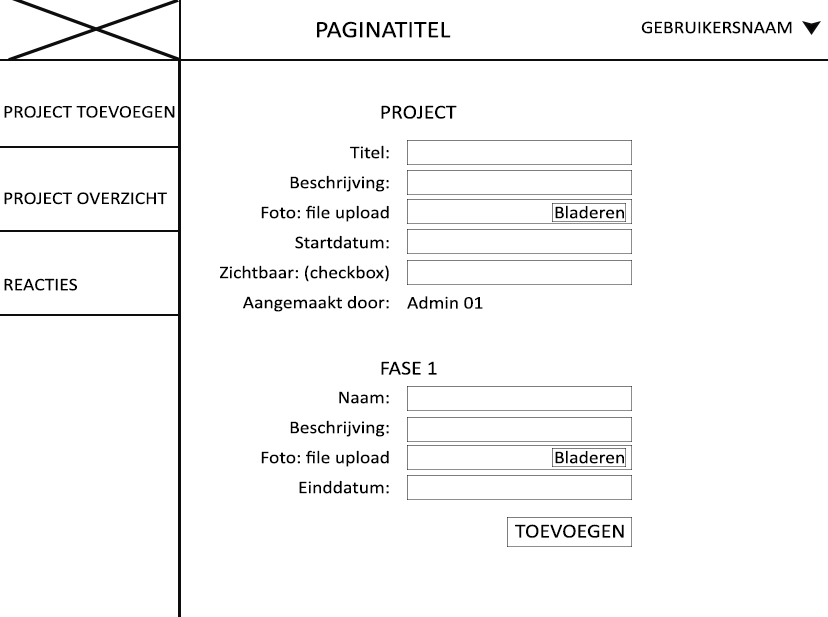
<style>
.page{position:relative;width:828px;height:617px;background:#ffffff}
.page>*{position:absolute;margin:0}
.t1{font:24px "Calibri";color:#000000;scale:1.09 1}
.t2{font:18px "Calibri";color:#000000;scale:1.09 1}
.t3{font:20px "Calibri";color:#000000;scale:1.09 1}
.t4{font:18px/30px "Calibri";color:#000000;scale:1.09 1}
</style>
<div class="page">
<p class="t1" style="left:317px;top:21px;width:134px;height:17px">PAGINATITEL</p>
<p class="t2" style="left:641px;top:21px;width:151px;height:13px">GEBRUIKERSNAAM</p>
<p class="t2" style="left:4px;top:106px;width:171px;height:185px">PROJECT TOEVOEGEN<br><br><br><br>PROJECT OVERZICHT<br><br><br><br>REACTIES</p>
<p class="t3" style="left:381px;top:105px;width:76px;height:14px">PROJECT</p>
<p class="t4" style="left:220px;top:145px;width:169px;height:167px;text-align:right">Titel:<br>Beschrijving:<br>Foto: file upload<br>Startdatum:<br>Zichtbaar: (checkbox)<br>Aangemaakt door:</p>
<p class="t2" style="left:555px;top:205px;width:69px;height:14px">Bladeren</p>
<p class="t2" style="left:407px;top:296px;width:76px;height:13px">Admin 01</p>
<p class="t3" style="left:381px;top:361px;width:56px;height:14px">FASE 1</p>
<p class="t4" style="left:261px;top:391px;width:128px;height:103px;text-align:right">Naam: <br>Beschrijving:<br>Foto: file upload<br>Einddatum:</p>
<p class="t2" style="left:555px;top:450px;width:69px;height:14px">Bladeren</p>
<p class="t3" style="left:515px;top:524px;width:109px;height:14px">TOEVOEGEN</p>
</div>
